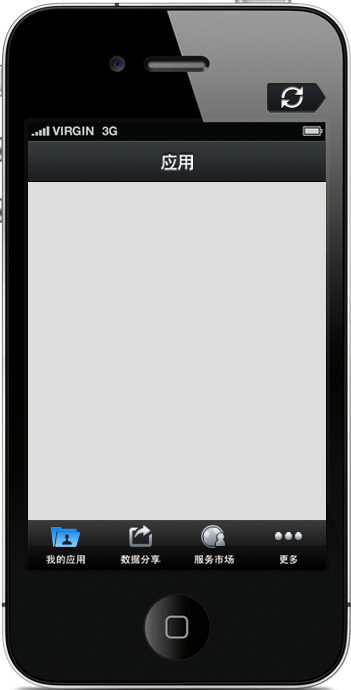
<style>
.page{position:relative;width:351px;height:690px;background:#dddddd}
.page>*{position:absolute;margin:0}
.t1{font:16.8px "CTCuHeiSJ";color:#ffffff}
.t2{font:9.9px "SimHei";color:#ffffff}
.t3{font:9.9px "SimHei";color:#f0f0f0}
.t4{font:9.9px "SimHei";color:#f5f5f5}
</style>
<div class="page">
<p class="t1" style="left:161px;top:154px;width:32px;height:17px">应用</p>
<p class="t2" style="left:46px;top:555px;width:39px;height:9px">我的应用</p>
<p class="t3" style="left:120px;top:555px;width:41px;height:9px">数据分享</p>
<p class="t4" style="left:194px;top:555px;width:40px;height:9px">服务市场</p>
<p class="t2" style="left:280px;top:555px;width:17px;height:9px">更多</p>
</div>
